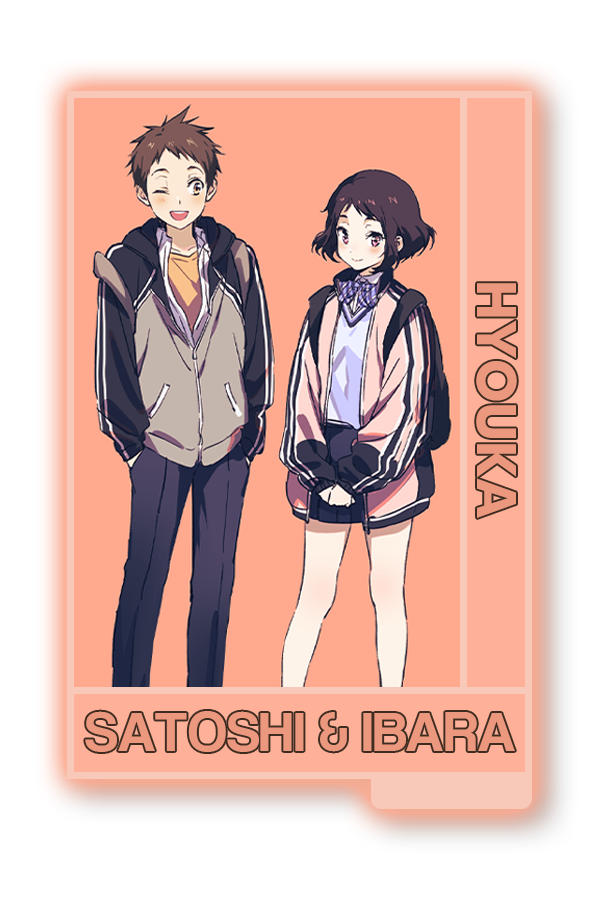
<style>
.page{position:relative;width:600px;height:900px;background:#ffffff}
.page>*{position:absolute;margin:0}
.t1{font:55.7px "MADETOMMY-Bold";color:#ec987e}
.t2{font:58.3px "CoolveticaRg-Regular";color:#ec987e}
</style>
<div class="page">
<p class="t1" style="left:476px;top:283px;width:41px;height:235px;rotate:90deg">HYOUKA</p>
<p class="t2" style="left:85px;top:711px;width:430px;height:41px">SATOSHI &amp; IBARA</p>
</div>
